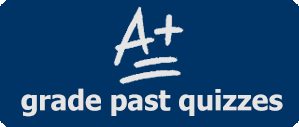
<style>
.page{position:relative;width:299px;height:127px;background:#003366}
.page>*{position:absolute;margin:0}
.t1{font:28px "Tahoma-Bold";color:#e5e5e5}
</style>
<div class="page">
<p class="t1" style="left:21px;top:88px;width:262px;height:29px">grade past quizzes</p>
</div>
